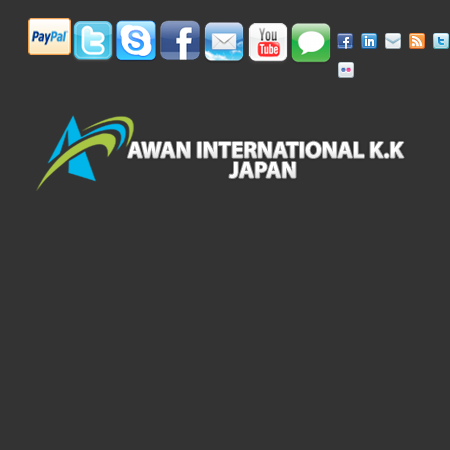
<style>
.page{position:relative;width:450px;height:450px;background:#333333}
.page>*{position:absolute;margin:0}
.t1{font:23px "MyriadPro-Bold";color:#ffffff}
</style>
<div class="page">
<p class="t1" style="left:127px;top:141px;width:277px;height:17px">AWAN INTERNATIONAL K.K</p>
<p class="t1" style="left:229px;top:162px;width:67px;height:16px">JAPAN</p>
</div>
